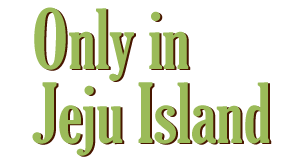
<style>
.page{position:relative;width:300px;height:160px;background:#ffffff}
.page>*{position:absolute;margin:0}
.t1{font:80px "GloucesterMT-ExtraCondensed";color:#9bbb59}
</style>
<div class="page">
<p class="t1" style="left:34px;top:7px;width:155px;height:74px">Only in</p>
<p class="t1" style="left:36px;top:8px;width:155px;height:74px">Only in</p>
<p class="t1" style="left:32px;top:82px;width:238px;height:74px">Jeju Island</p>
<p class="t1" style="left:34px;top:83px;width:238px;height:74px">Jeju Island</p>
</div>
